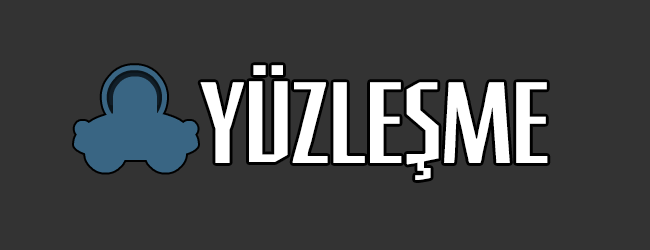
<style>
.page{position:relative;width:650px;height:250px;background:#333333}
.page>*{position:absolute;margin:0}
.t1{font:100px "Primary-Bold";color:#ffffff;scale:1.2 1}
</style>
<div class="page">
<p class="t1" style="left:200px;top:65px;width:348px;height:115px">YÜZLEŞME</p>
</div>
